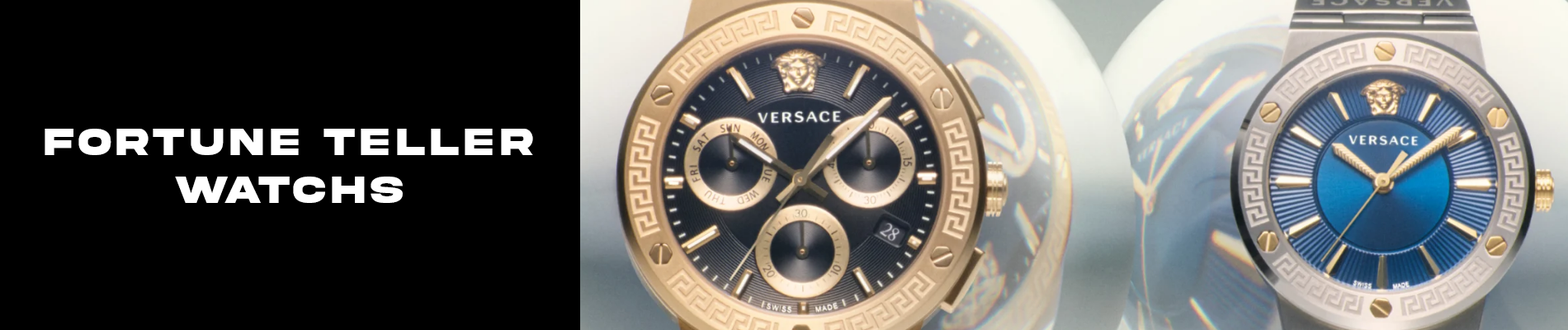
<style>
.page{position:relative;width:1568px;height:330px;background:#000000}
.page>*{position:absolute;margin:0}
.t1{font:39.6px "AkiraExpanded-SuperBold";letter-spacing:0.1em;color:#ffffff;scale:0.9 1}
</style>
<div class="page">
<p class="t1" style="left:45px;top:129px;width:488px;height:74px;text-align:center">FORTUNE TELLER<br>WATCHS</p>
</div>
